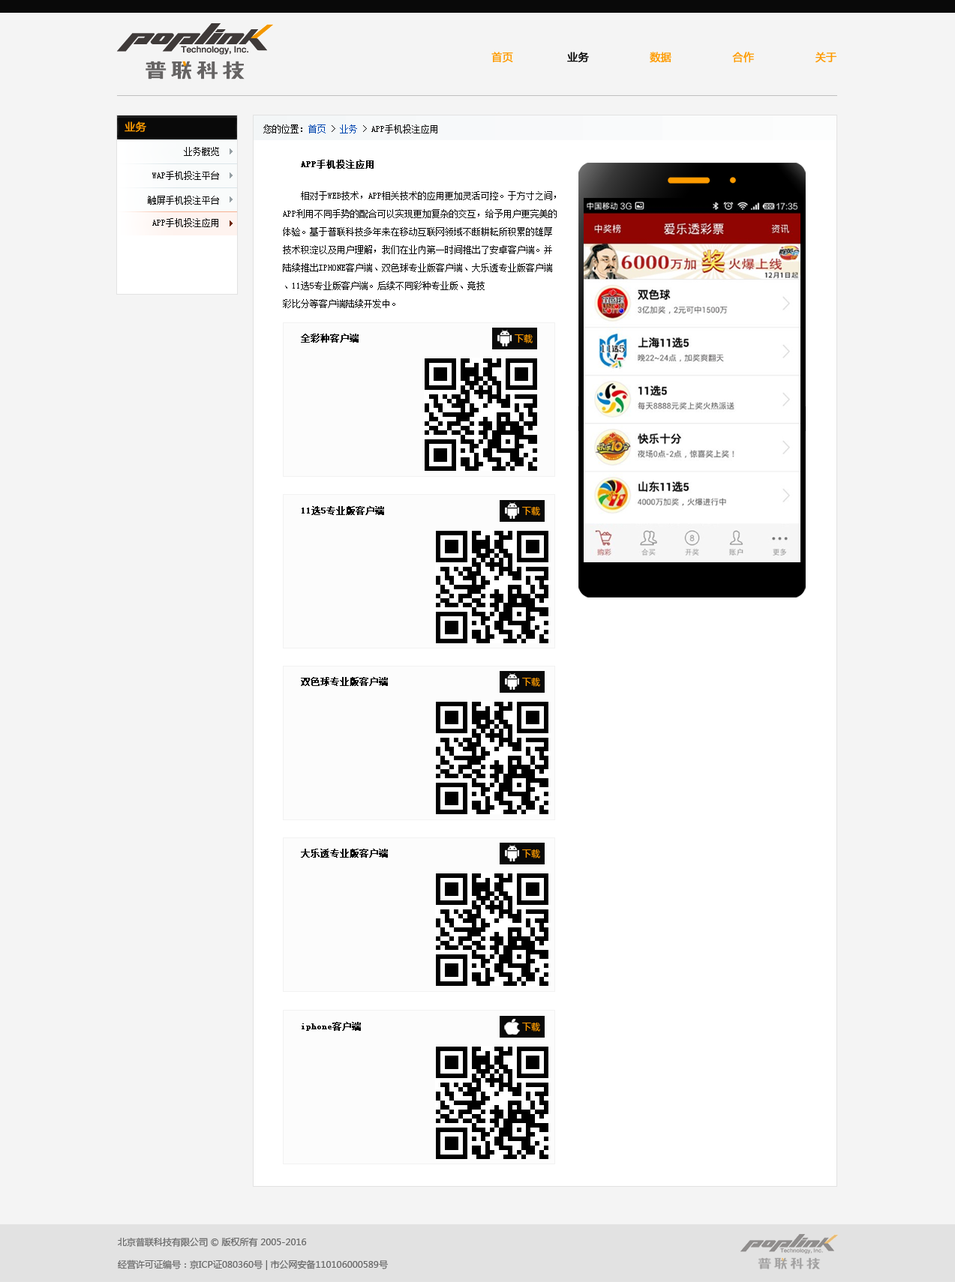
<style>
.page{position:relative;width:955px;height:1282px;background:#f4f4f4}
.page>*{position:absolute;margin:0}
.t1{font:10.5px "MicrosoftYaHei";color:#fe9b00;text-transform:uppercase;font-weight:bold}
.t2{font:10.5px "MicrosoftYaHei";color:#090909;text-transform:uppercase;font-weight:bold}
.t3{font:10.5px "MicrosoftYaHei";color:#fe9b00;font-weight:bold}
.t4{font:9px "SimSun";color:#090909;text-transform:uppercase}
.t5{font:9px "SimSun";color:#0146af;text-transform:uppercase}
.t6{font:9px/18px "SimSun";color:#090909;text-transform:uppercase}
.t7{font:9px/18px "SimSun";color:#090909;text-transform:uppercase;font-weight:bold}
.t8{font:9px "SimSun";color:#090909;text-transform:uppercase;font-weight:bold}
.t9{font:9px "MicrosoftYaHei";color:#fe9b00;text-transform:uppercase}
.t10{font:9px "SimSun";color:#090909;font-weight:bold}
.t11{font:9px/22.5px "MicrosoftYaHei";color:#666666}
</style>
<div class="page">
<p class="t1" style="left:491px;top:52px;width:345px;height:11px">首页 <span class="t2">               业务 </span>                 数据                  合作                  关于</p>
<p class="t3" style="left:124px;top:122px;width:22px;height:10px">业务</p>
<p class="t4" style="left:263px;top:124px;width:174px;height:10px">您的位置：<span class="t5">首页 </span>&gt; <span class="t5">业务</span> &gt; App手机投注应用</p>
<p class="t4" style="left:184px;top:147px;width:35px;height:9px">业务概览</p>
<p class="t6" style="left:283px;top:160px;width:273px;height:148px"><span class="t7">    APP手机投注应用<br><br></span>    相对于WEB技术，APP相关技术的应用更加灵活可控。于方寸之间，<br>APP利用不同手势的配合可以实现更加复杂的交互，给予用户更完美的<br>体验。基于普联科技多年来在移动互联网领域不断耕耘所积累的雄厚<br>技术积淀以及用户理解，我们在业内第一时间推出了安卓客户端。并<br>陆续推出iphone客户端、双色球专业版客户端、大乐透专业版客户端<br>、11选5专业版客户端。后续不同彩种专业版、竞技<br>彩比分等客户端陆续开发中。</p>
<p class="t4" style="left:152px;top:171px;width:67px;height:9px">WAP手机投注平台</p>
<p class="t4" style="left:148px;top:196px;width:71px;height:9px">触屏手机投注平台</p>
<p class="t4" style="left:152px;top:218px;width:66px;height:9px">App手机投注应用</p>
<p class="t8" style="left:301px;top:334px;width:57px;height:9px">全彩种客户端</p>
<p class="t9" style="left:514px;top:334px;width:18px;height:10px">下载</p>
<p class="t8" style="left:302px;top:506px;width:82px;height:9px">11选5专业版客户端</p>
<p class="t9" style="left:522px;top:506px;width:18px;height:10px">下载</p>
<p class="t8" style="left:301px;top:677px;width:87px;height:9px">双色球专业版客户端</p>
<p class="t9" style="left:522px;top:677px;width:18px;height:10px">下载</p>
<p class="t8" style="left:301px;top:849px;width:87px;height:9px">大乐透专业版客户端</p>
<p class="t9" style="left:522px;top:849px;width:18px;height:10px">下载</p>
<p class="t10" style="left:302px;top:1022px;width:59px;height:9px">iphone<span class="t8">客户端</span></p>
<p class="t9" style="left:522px;top:1022px;width:18px;height:10px">下载</p>
<p class="t11" style="left:118px;top:1238px;width:270px;height:32px">北京普联科技有限公司 © 版权所有 2005-2016<br>经营许可证编号：京ICP证080360号 | 市公网安备110106000589号</p>
</div>
